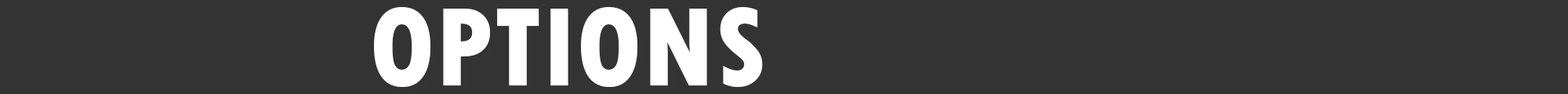
<style>
.page{position:relative;width:1568px;height:94px;background:#333333}
.page>*{position:absolute;margin:0}
.t1{font:117.6px "TwCenMT-CondensedExtraBold";color:#ffffff}
</style>
<div class="page">
<p class="t1" style="left:374px;top:7px;width:389px;height:80px">OPTIONS</p>
</div>
